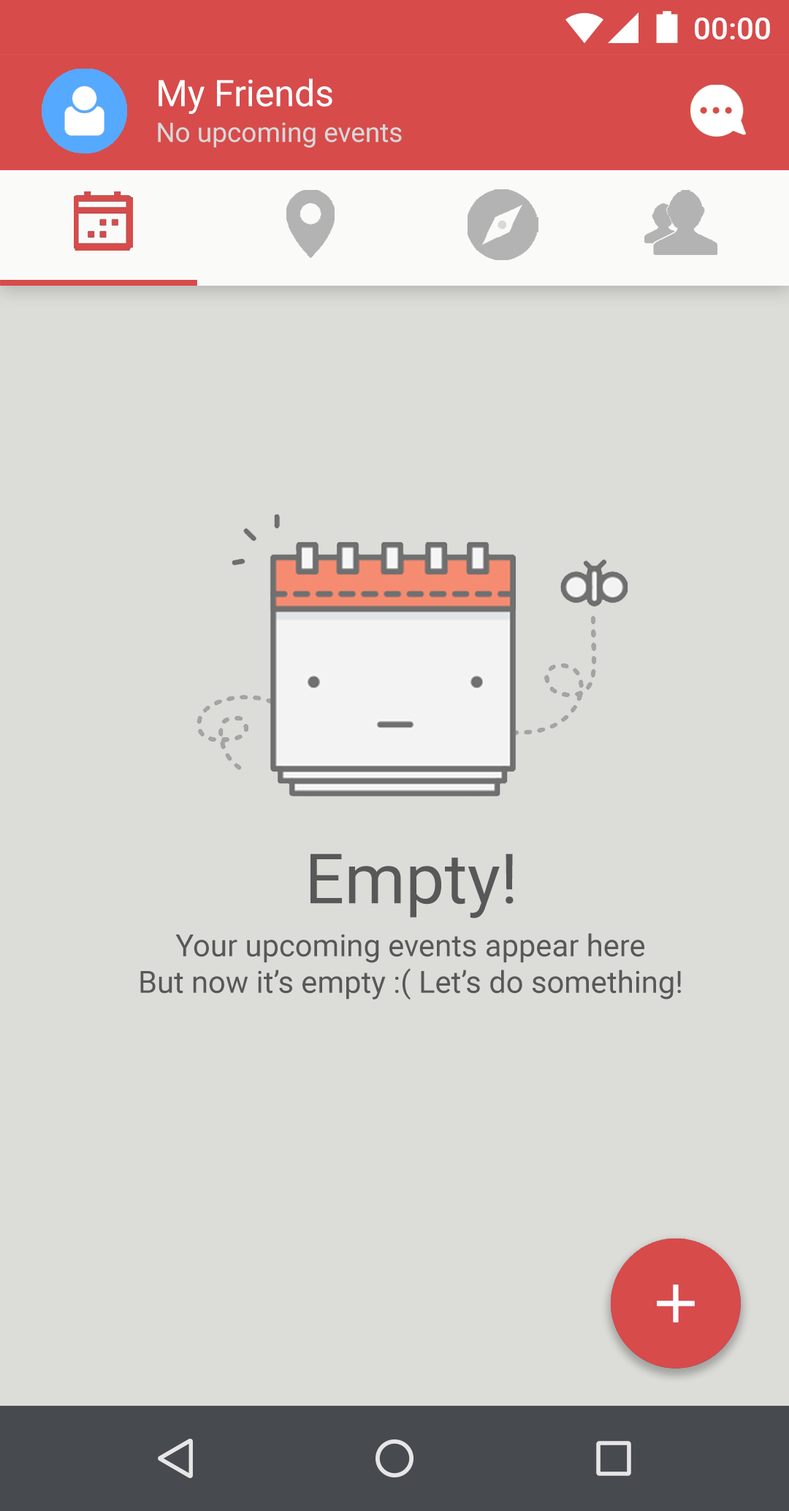
<style>
.page{position:relative;width:789px;height:1511px;background:#dcddd8}
.page>*{position:absolute;margin:0}
.t1{font:30.7px "Roboto-Medium";color:#ffffff}
.t2{font:36.5px "Roboto-Regular";color:#ffffff}
.t3{font:27px "Roboto-Regular";color:#d8d8d8}
.t4{font:69.4px "Roboto-Regular";color:#585858}
.t5{font:30.5px "Roboto-Regular";color:#585858}
</style>
<div class="page">
<p class="t1" style="left:695px;top:18px;width:75px;height:21px">00:00</p>
<p class="t2" style="left:159px;top:78px;width:173px;height:36px">My Friends</p>
<p class="t3" style="left:158px;top:122px;width:244px;height:26px">No upcoming events</p>
<p class="t4" style="left:311px;top:853px;width:203px;height:65px">Empty!</p>
<p class="t5" style="left:140px;top:933px;width:541px;height:67px;text-align:center">Your upcoming events appear here<br>But now it’s empty :( Let’s do something!</p>
</div>
